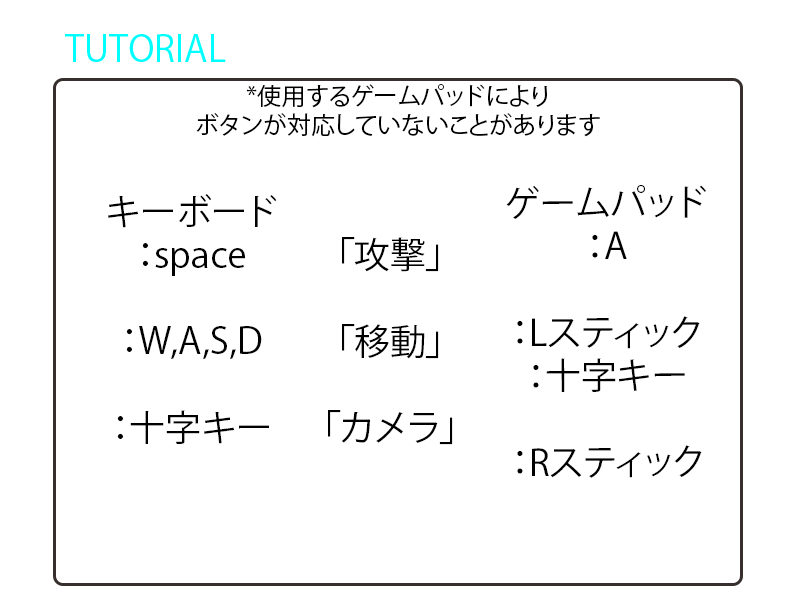
<style>
.page{position:relative;width:800px;height:600px;background:#ffffff}
.page>*{position:absolute;margin:0}
.t1{font:36px "KozGoPr6N-Regular";color:#00ffff}
.t2{font:24px "KozGoPr6N-Regular";color:#000000}
.t3{font:36px "KozGoPr6N-Regular";color:#000000}
</style>
<div class="page">
<p class="t1" style="left:65px;top:34px;width:161px;height:28px">TUTORIAL</p>
<p class="t2" style="left:196px;top:84px;width:404px;height:53px;text-align:center">*使用するゲームパッドにより<br>ボタンが対応していないことがあります</p>
<p class="t3" style="left:506px;top:185px;width:200px;height:293px;text-align:center">ゲームパッド<br>：A<br><br>：Lスティック<br>：十字キー<br><br>：Rスティック</p>
<p class="t3" style="left:108px;top:194px;width:169px;height:250px;text-align:center">キーボード<br>：space<br><br>：W,A,S,D<br><br>：十字キー</p>
<p class="t3" style="left:328px;top:237px;width:125px;height:208px;text-align:center">「攻撃」<br><br>「移動」<br><br>「カメラ」</p>
</div>
